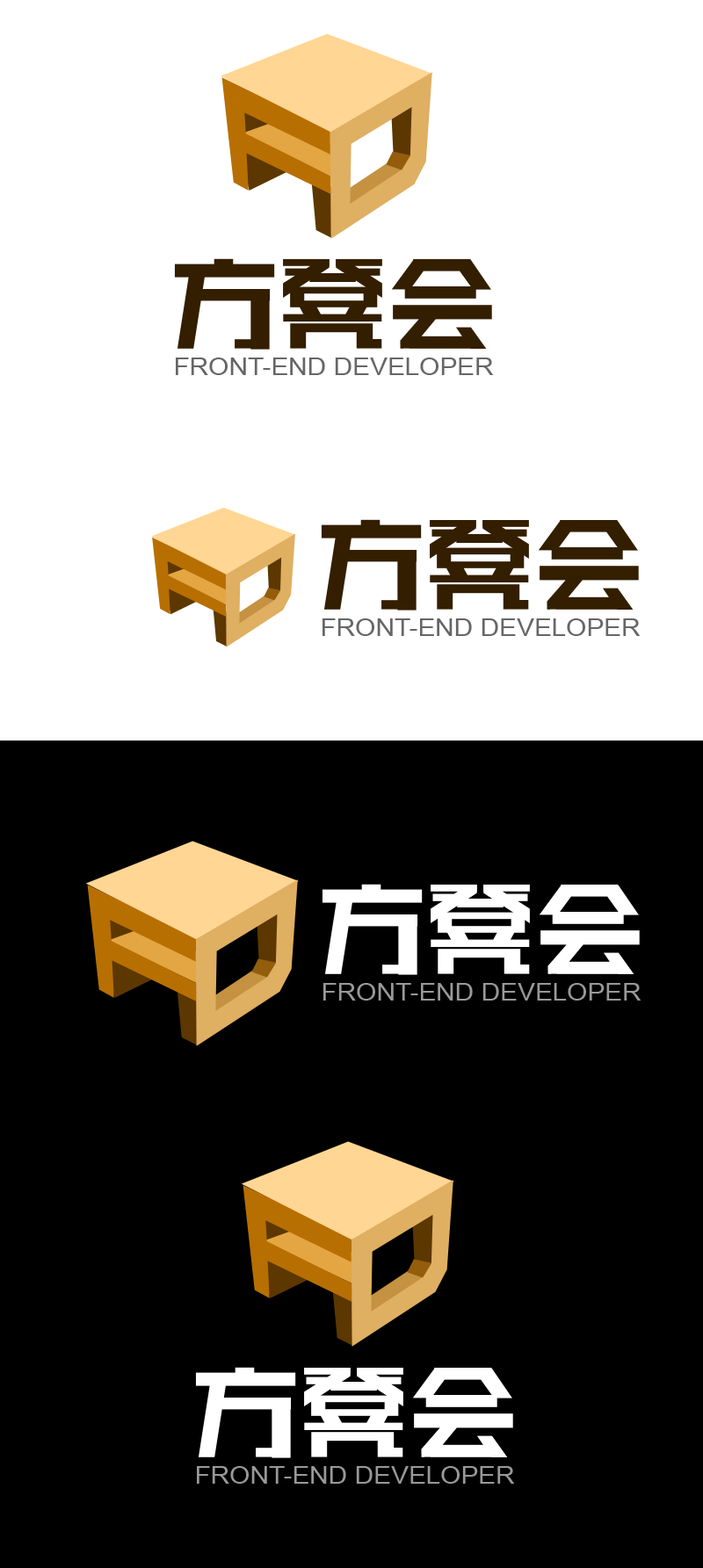
<style>
.page{position:relative;width:703px;height:1568px;background:#000000}
.page>*{position:absolute;margin:0}
.t1{font:23.5px "ArialMT";color:#666666;scale:1.11 1}
.t2{font:23.5px "ArialMT";color:#999999;scale:1.11 1}
</style>
<div class="page">
<p class="t1" style="left:176px;top:358px;width:318px;height:17px">FRONT-END DEVELOPER</p>
<p class="t1" style="left:322px;top:618px;width:318px;height:18px">FRONT-END DEVELOPER</p>
<p class="t2" style="left:323px;top:983px;width:318px;height:18px">FRONT-END DEVELOPER</p>
<p class="t2" style="left:197px;top:1466px;width:318px;height:18px">FRONT-END DEVELOPER</p>
</div>
